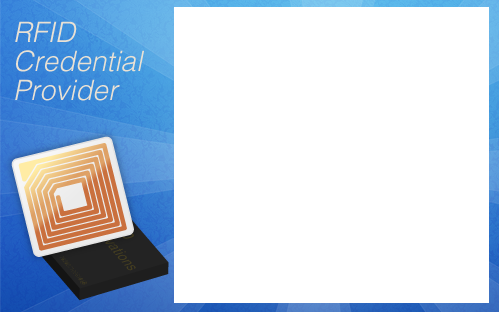
<style>
.page{position:relative;width:499px;height:312px;background:#ffffff}
.page>*{position:absolute;margin:0}
.t1{font:28px/29px "HelveticaLT-LightOblique";color:#e9e1d4}
</style>
<div class="page">
<p class="t1" style="left:15px;top:21px;width:129px;height:80px">RFID<br>Credential<br>Provider</p>
</div>
